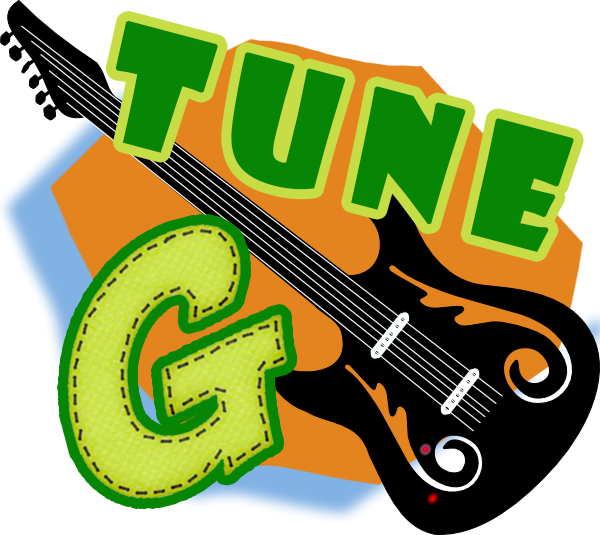
<style>
.page{position:relative;width:600px;height:535px;background:#ffffff}
.page>*{position:absolute;margin:0}
.t1{font:154.2px "ShowcardGothic-Reg";letter-spacing:0.16em;color:#078504;font-weight:bold}
</style>
<div class="page">
<p class="t1" style="left:115px;top:20px;width:459px;height:232px;rotate:15deg">tune</p>
</div>
